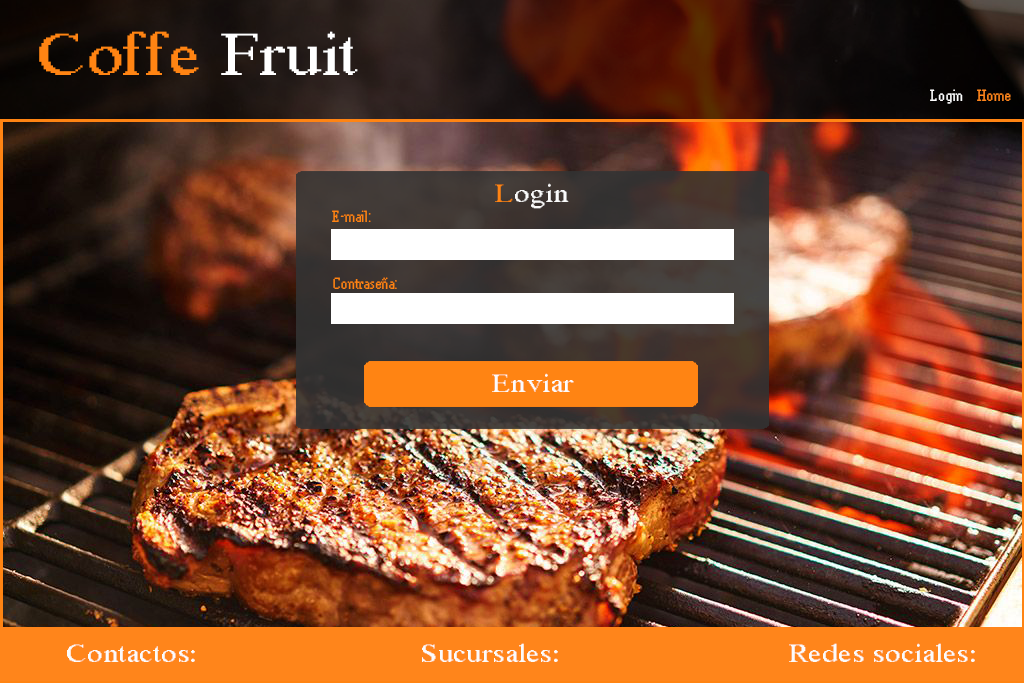
<style>
.page{position:relative;width:1024px;height:683px}
.page>*{position:absolute;margin:0}
.t1{font:60px "MS Serif";color:#ff851b;scale:1.21 1}
.t2{font:60px "MS Serif";color:#ffffff;scale:1.21 1}
.t3{font:14px "MS Serif";color:#ffffff}
.t4{font:14px "MS Serif";color:#ff851b}
.t5{font:25.4px "MS Serif";color:#fafafa;scale:1.21 1}
.t6{font:25.4px "MS Serif";color:#ff851b;scale:1.21 1}
.t7{font:25.4px "MS Serif";color:#fbfbfb;scale:1.21 1}
</style>
<div class="page">
<p class="t1" style="left:39px;top:31px;width:319px;height:44px">Coffe <span class="t2">Fruit</span></p>
<p class="t3" style="left:930px;top:89px;width:33px;height:15px">Login</p>
<p class="t4" style="left:977px;top:89px;width:34px;height:12px">Home</p>
<p class="t5" style="left:495px;top:183px;width:74px;height:26px"><span class="t6">L</span>ogin</p>
<p class="t4" style="left:332px;top:210px;width:39px;height:12px">E-mail:</p>
<p class="t4" style="left:333px;top:277px;width:64px;height:12px">Contraseña:</p>
<p class="t7" style="left:492px;top:373px;width:82px;height:19px">Enviar</p>
<p class="t7" style="left:67px;top:644px;width:128px;height:18px">Contactos:</p>
<p class="t7" style="left:422px;top:643px;width:136px;height:19px">Sucursales:</p>
<p class="t7" style="left:789px;top:643px;width:186px;height:19px">Redes sociales:</p>
</div>
